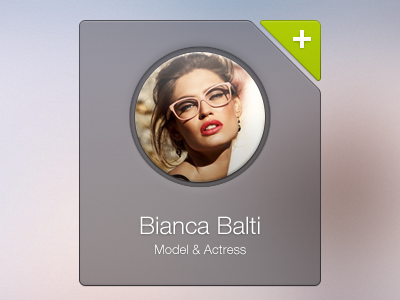
<style>
.page{position:relative;width:400px;height:300px}
.page>*{position:absolute;margin:0}
.t1{font:24px "HelveticaNeueLT-Light";color:#ffffff}
.t2{font:13px "HelveticaNeueLT-Light";color:#ffffff}
</style>
<div class="page">
<p class="t1" style="left:140px;top:216px;width:120px;height:19px">Bianca Balti</p>
<p class="t2" style="left:155px;top:244px;width:91px;height:11px">Model &amp; Actress</p>
</div>
